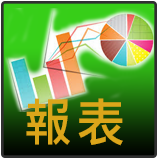
<style>
.page{position:relative;width:160px;height:160px}
.page>*{position:absolute;margin:0}
.t1{font:52.9px "MicrosoftJhengHeiBold";letter-spacing:0.08em;color:#dba71b;scale:0.93 1}
</style>
<div class="page">
<p class="t1" style="left:26px;top:98px;width:97px;height:48px">報表</p>
</div>
